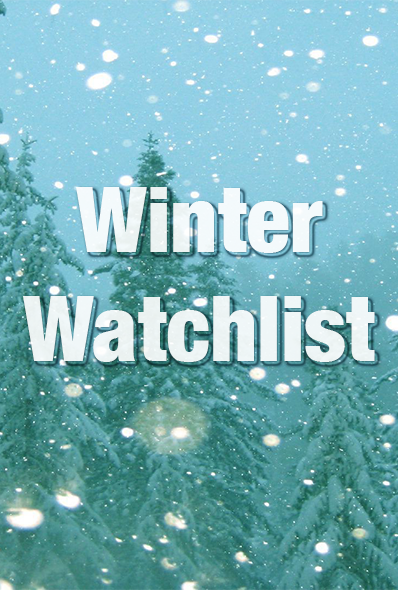
<style>
.page{position:relative;width:398px;height:590px}
.page>*{position:absolute;margin:0}
.t1{font:91px "HelveticaNeue-CondensedBlack";color:#ffffff}
</style>
<div class="page">
<p class="t1" style="left:23px;top:187px;width:352px;height:175px;text-align:center">Winter Watchlist</p>
</div>
